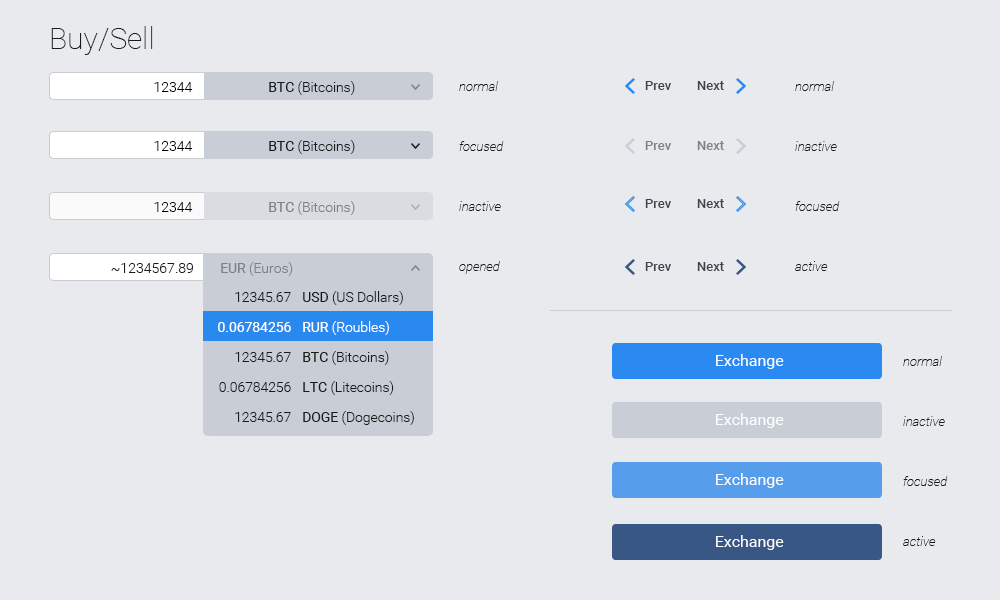
<style>
.page{position:relative;width:1000px;height:600px;background:#e9eaed}
.page>*{position:absolute;margin:0}
.t1{font:30px "Roboto-Thin";color:#1a1a1a}
.t2{font:14px "Roboto-Light";color:#000000}
.t3{font:14px "Roboto-Light";color:#1a1a1a}
.t4{font:14px "Roboto-Regular";color:#1a1a1a}
.t5{font:13px/60px "Roboto-ThinItalic";color:#1a1a1a}
.t6{font:13px "Roboto-Medium";color:#3f444b}
.t7{font:13px "Roboto-Medium";color:#818181}
.t8{font:14px "Roboto-Light";color:#818181}
.t9{font:14px "Roboto-Regular";color:#818181}
.t10{font:14px/30px "Roboto-Light";color:#1a1a1a}
.t11{font:14px/30px "Roboto-Regular";color:#ffffff}
.t12{font:14px/30px "Roboto-Regular";color:#1a1a1a}
.t13{font:14px/30px "Roboto-Light";color:#ffffff}
.t14{font:16px "Roboto-Regular";color:#ffffff}
</style>
<div class="page">
<p class="t1" style="left:51px;top:26px;width:102px;height:29px">Buy/Sell</p>
<p class="t2" style="left:154px;top:82px;width:39px;height:10px">12344</p>
<p class="t3" style="left:269px;top:81px;width:86px;height:14px"><span class="t4">BTC</span> (Bitcoins)</p>
<p class="t5" style="left:459px;top:81px;width:45px;height:193px">normal<br>focused<br>inactive<br>opened</p>
<p class="t6" style="left:645px;top:81px;width:79px;height:9px">Prev        Next</p>
<p class="t5" style="left:795px;top:81px;width:45px;height:190px">normal<br>inactive<br>focused<br>active</p>
<p class="t2" style="left:154px;top:141px;width:39px;height:10px">12344</p>
<p class="t3" style="left:269px;top:140px;width:86px;height:14px"><span class="t4">BTC</span> (Bitcoins)</p>
<p class="t7" style="left:645px;top:141px;width:79px;height:9px">Prev        Next</p>
<p class="t2" style="left:154px;top:202px;width:39px;height:10px">12344</p>
<p class="t8" style="left:269px;top:201px;width:86px;height:14px"><span class="t9">BTC</span> (Bitcoins)</p>
<p class="t6" style="left:645px;top:199px;width:79px;height:9px">Prev        Next</p>
<p class="t3" style="left:111px;top:263px;width:82px;height:10px">~1234567.89</p>
<p class="t8" style="left:221px;top:262px;width:72px;height:14px"><span class="t9">EUR </span>(Euros)</p>
<p class="t6" style="left:645px;top:262px;width:79px;height:9px">Prev        Next</p>
<p class="t10" style="left:218px;top:292px;width:73px;height:130px;text-align:right">12345.67<br><span class="t11">0.06784256<br></span>12345.67<br>0.06784256<br>12345.67</p>
<p class="t10" style="left:303px;top:291px;width:111px;height:134px"><span class="t12">USD</span> (US Dollars)<br><span class="t11">RUR </span><span class="t13">(Roubles)<br></span><span class="t12">BTC </span>(Bitcoins)<br><span class="t12">LTC </span>(Litecoins)<br><span class="t12">DOGE </span>(Dogecoins)</p>
<p class="t14" style="left:716px;top:354px;width:68px;height:15px">Exchange</p>
<p class="t5" style="left:903px;top:356px;width:45px;height:190px">normal<br>inactive<br>focused<br>active</p>
<p class="t14" style="left:716px;top:413px;width:68px;height:15px">Exchange</p>
<p class="t14" style="left:716px;top:473px;width:68px;height:15px">Exchange</p>
<p class="t14" style="left:716px;top:535px;width:68px;height:15px">Exchange</p>
</div>
